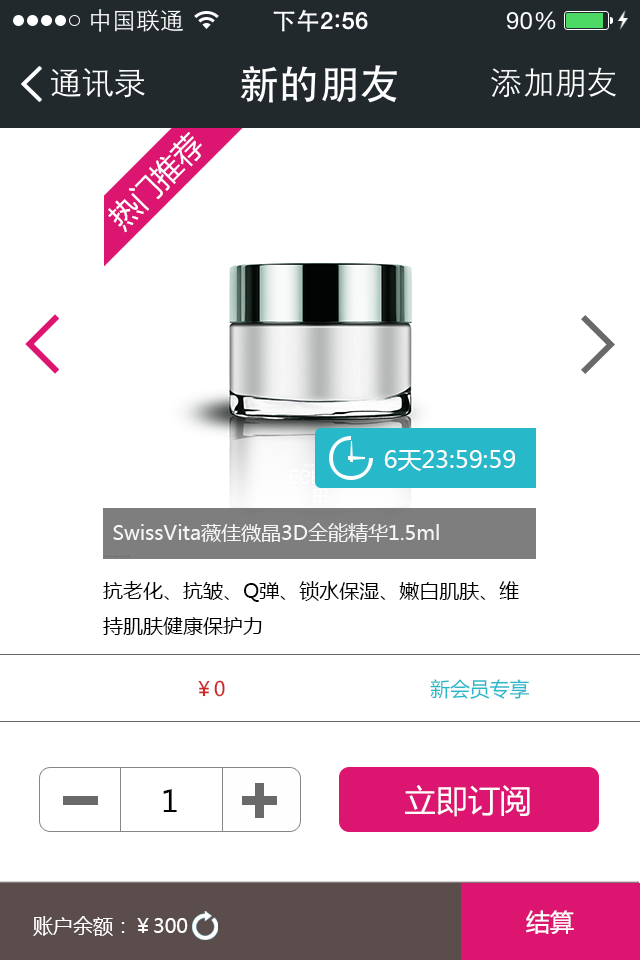
<style>
.page{position:relative;width:640px;height:960px;background:#ffffff}
.page>*{position:absolute;margin:0}
.t1{font:23.7px "MicrosoftYaHei";color:#ffffff}
.t2{font:20px "MicrosoftYaHei";color:#f7f6f6}
.t3{font:20px "MicrosoftYaHei";color:#000000}
.t4{font:20px "MicrosoftYaHei";color:#27b9c9}
.t5{font:20px "MicrosoftYaHei";color:#d12626}
.t6{font:32.4px "MicrosoftYaHei";color:#ffffff}
.t7{font:30px "MicrosoftYaHei";color:#000000}
.t8{font:20px "MicrosoftYaHei";color:#ffffff}
.t9{font:20px "MicrosoftYaHei";color:#fffefe}
.t10{font:24px "MicrosoftYaHei";color:#ffffff}
</style>
<div class="page">
<p class="t1" style="left:384px;top:450px;width:131px;height:21px">6天23:59:59</p>
<p class="t2" style="left:113px;top:523px;width:326px;height:19px">SwissVita薇佳微晶3D全能精华1.5ml</p>
<p class="t3" style="left:103px;top:581px;width:416px;height:54px">抗老化、抗皱、Q弹、锁水保湿、嫩白肌肤、维<br>持肌肤健康保护力</p>
<p class="t4" style="left:198px;top:679px;width:331px;height:20px"><span class="t5">￥0                                   </span>新会员专享</p>
<p class="t6" style="left:405px;top:785px;width:125px;height:32px">立即订阅</p>
<p class="t7" style="left:163px;top:789px;width:14px;height:23px">1</p>
<p class="t8" style="left:33px;top:916px;width:155px;height:20px">账户余额：<span class="t9">￥</span>300</p>
<p class="t10" style="left:526px;top:910px;width:48px;height:24px">结算</p>
</div>
